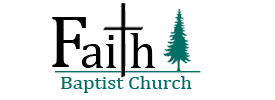
<style>
.page{position:relative;width:275px;height:100px;background:#ffffff}
.page>*{position:absolute;margin:0}
.t1{font:75px "Cambria";color:#010101}
.t2{font:50px "Cambria";color:#010101}
.t3{font:18.4px "Cambria";color:#006f63;scale:1.13 1}
</style>
<div class="page">
<p class="t1" style="left:52px;top:17px;width:34px;height:50px">F</p>
<p class="t2" style="left:82px;top:33px;width:73px;height:35px">ai h</p>
<p class="t3" style="left:61px;top:76px;width:131px;height:17px">Baptist Church</p>
</div>
